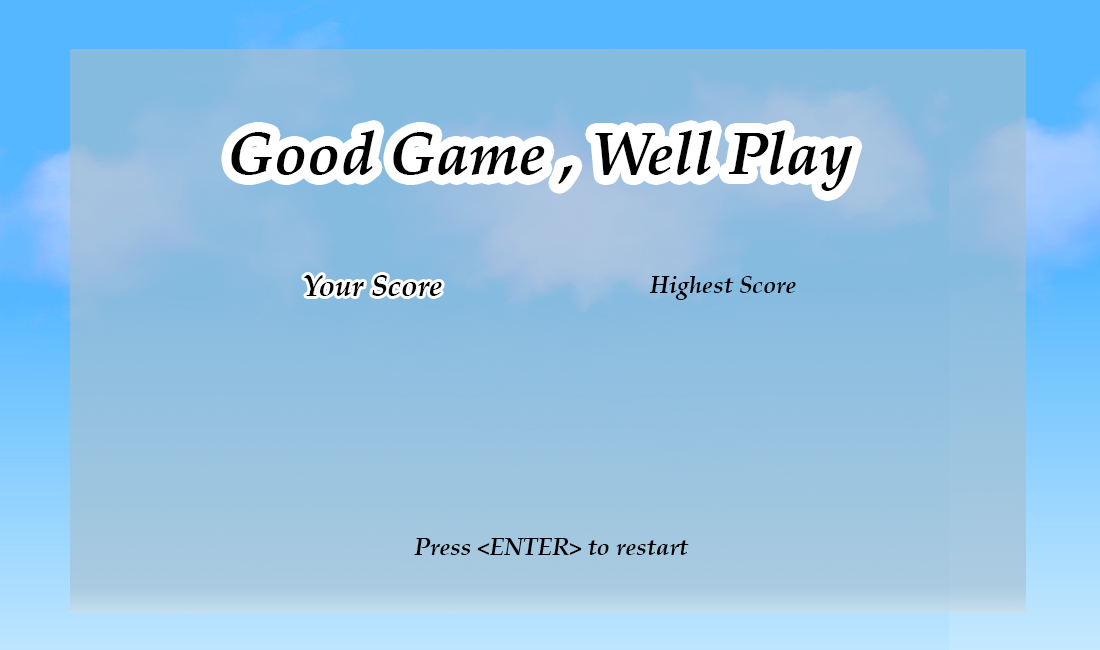
<style>
.page{position:relative;width:1100px;height:650px}
.page>*{position:absolute;margin:0}
.t1{font:60px "PalatinoLinotype-BoldItalic";color:#000000}
.t2{font:30px "PalatinoLinotype-BoldItalic";color:#000000}
.t3{font:24px "PalatinoLinotype-BoldItalic";color:#000000}
</style>
<div class="page">
<p class="t1" style="left:231px;top:130px;width:622px;height:61px">Good Game , Well Play</p>
<p class="t2" style="left:304px;top:275px;width:138px;height:21px">Your Score</p>
<p class="t3" style="left:649px;top:276px;width:147px;height:24px">Highest Score</p>
<p class="t3" style="left:414px;top:538px;width:275px;height:17px">Press &lt;ENTER&gt; to restart</p>
</div>
